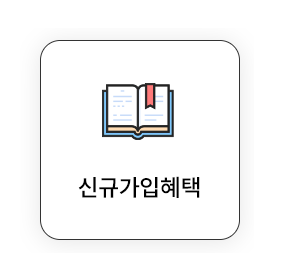
<style>
.page{position:relative;width:281px;height:280px;background:#ffffff}
.page>*{position:absolute;margin:0}
.t1{font:23px "NotoSansKR-Medium";letter-spacing:-0.025em;color:#000000}
</style>
<div class="page">
<p class="t1" style="left:78px;top:176px;width:122px;height:22px">신규가입혜택</p>
</div>
